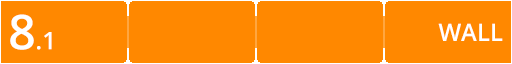
<style>
.page{position:relative;width:512px;height:64px;background:#ff8800}
.page>*{position:absolute;margin:0}
.t1{font:24px "OpenSans-Semibold";color:#ffffff}
.t2{font:48px "OpenSans-Semibold";color:#ffffff}
</style>
<div class="page">
<p class="t1" style="left:10px;top:14px;width:42px;height:36px"><span class="t2">8</span>.1</p>
<p class="t1" style="left:438px;top:23px;width:65px;height:18px">WALL</p>
</div>
